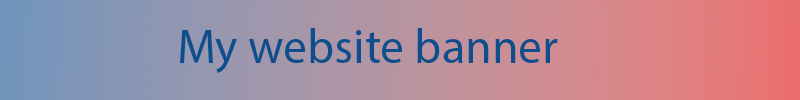
<style>
.page{position:relative;width:800px;height:100px}
.page>*{position:absolute;margin:0}
.t1{font:48px "MyriadPro-Regular";color:#0e4e8d}
</style>
<div class="page">
<p class="t1" style="left:180px;top:28px;width:378px;height:45px">My website banner</p>
</div>
